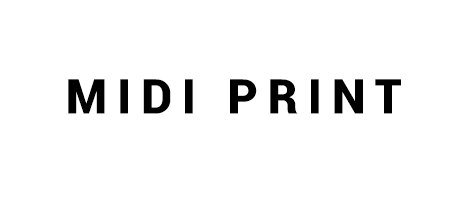
<style>
.page{position:relative;width:450px;height:200px;background:#ffffff}
.page>*{position:absolute;margin:0}
.t1{font:48px "Roboto-Black";letter-spacing:0.2em;color:#000000;text-transform:uppercase}
</style>
<div class="page">
<p class="t1" style="left:68px;top:79px;width:333px;height:35px">Midi print</p>
</div>
